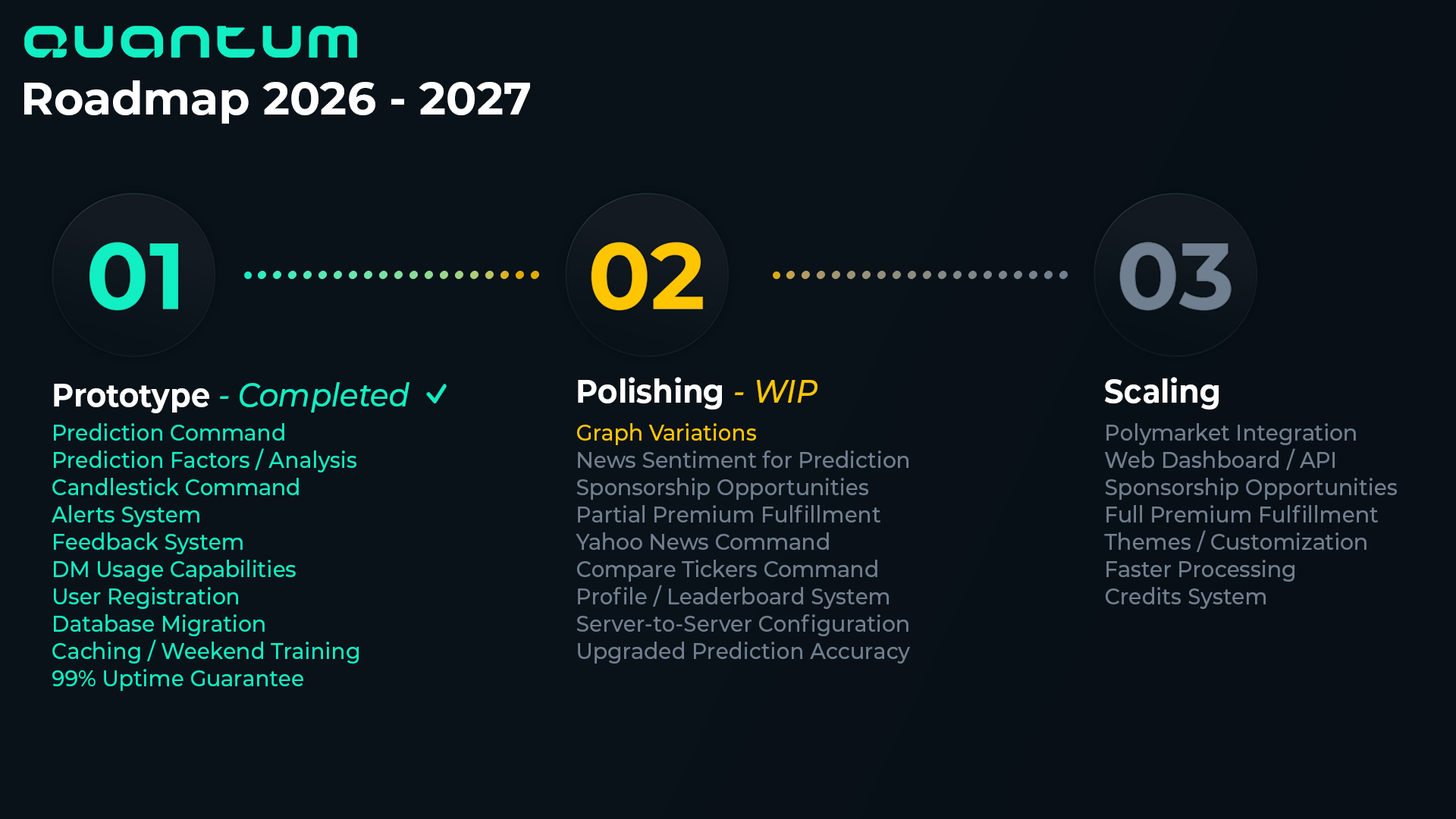
<style>
.page{position:relative;width:1456px;height:819px;background:#091119}
.page>*{position:absolute;margin:0}
.t1{font:45.5px "Montserrat-Bold";color:#ffffff}
.t2{font:32.2px "Montserrat-Bold";color:#ffffff;scale:0.94 1}
.t3{font:32.2px "Montserrat-MediumItalic";color:#ffc600;scale:0.94 1}
.t4{font:32.2px "Montserrat-MediumItalic";color:#12efc3;scale:0.94 1}
.t5{font:22.7px "Montserrat-Medium";color:#12efc3;scale:0.94 1}
.t6{font:22.7px "Montserrat-Medium";color:#708090;scale:0.94 1}
.t7{font:22.7px "Montserrat-Medium";color:#ffc600;scale:0.94 1}
</style>
<div class="page">
<p class="t1" style="left:24px;top:80px;width:506px;height:44px">Roadmap 2026 - 2027</p>
<p class="t2" style="left:578px;top:377px;width:239px;height:32px">Polishing <span class="t3">- WIP</span></p>
<p class="t2" style="left:1105px;top:377px;width:114px;height:32px">Scaling</p>
<p class="t4" style="left:54px;top:382px;width:355px;height:31px"><span class="t2">Prototype</span> - Completed</p>
<p class="t5" style="left:52px;top:423px;width:307px;height:268px">Prediction Command<br>Prediction Factors / Analysis<br>Candlestick Command<br>Alerts System<br>Feedback System<br>DM Usage Capabilities<br>User Registration<br>Database Migration<br>Caching / Weekend Training<br>99% Uptime Guarantee</p>
<p class="t6" style="left:576px;top:423px;width:334px;height:241px"><span class="t7">Graph Variations</span><br>News Sentiment for Prediction<br>Sponsorship Opportunities<br>Partial Premium Fulfillment<br>Yahoo News Command<br>Compare Tickers Command<br>Profile / Leaderboard System<br>Server-to-Server Configuration<br>Upgraded Prediction Accuracy</p>
<p class="t6" style="left:1104px;top:423px;width:293px;height:186px">Polymarket Integration<br>Web Dashboard / API<br>Sponsorship Opportunities<br>Full Premium Fulfillment<br>Themes / Customization<br>Faster Processing<br>Credits System</p>
</div>
